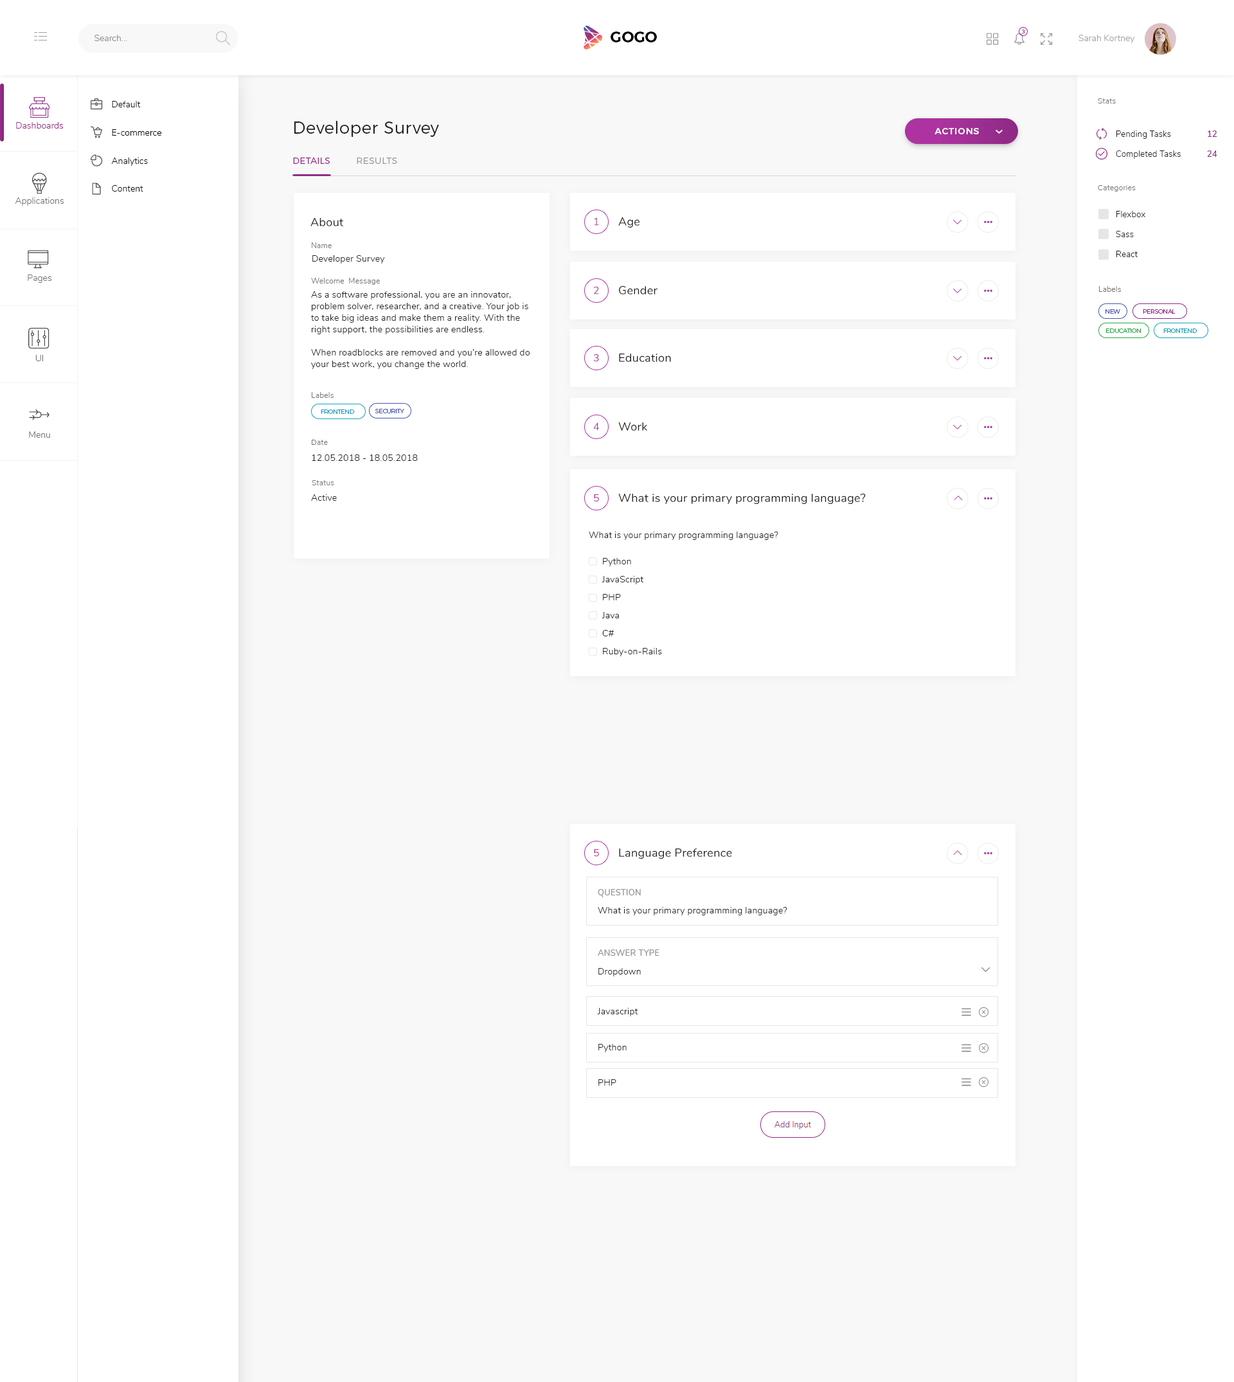
<style>
.page{position:relative;width:1234px;height:1382px;background:#ffffff}
.page>*{position:absolute;margin:0}
.t1{font:5.8px "Nunito-Regular";letter-spacing:0.02em;color:#98418f}
.t2{font:9px "Nunito-Light";color:#898989}
.t3{font:15.4px "Montserrat-SemiBold";color:#000000}
.t4{font:9px "Nunito-Light";color:#a0a0a0}
.t5{font:9px "Nunito-Light";color:#000000}
.t6{font:7.7px "Nunito-Light";letter-spacing:0.02em;color:#717171}
.t7{font:9px "Nunito-Light";color:#922c88}
.t8{font:16.7px "Montserrat-Light";letter-spacing:0.02em;color:#212121}
.t9{font:9px "Montserrat-Medium";letter-spacing:0.06em;color:#ffffff}
.t10{font:8.4px "Nunito-Light";letter-spacing:0.02em;color:#212121}
.t11{font:8.4px "Nunito-SemiBold";letter-spacing:0.02em;color:#922c88}
.t12{font:9px "Montserrat-Light";letter-spacing:0.02em;color:#922c88}
.t13{font:9px "Montserrat-Light";letter-spacing:0.02em;color:#999999}
.t14{font:9px "Nunito-Light";color:#737373}
.t15{font:11.6px "Nunito-Regular";letter-spacing:0.02em;color:#212121}
.t16{font:10.3px "Nunito-Regular";letter-spacing:0.02em;color:#ad33a1}
.t17{font:9px "Nunito-Light";letter-spacing:0.02em;color:#212121}
.t18{font:9px/11.6px "Nunito-Light";letter-spacing:0.02em;color:#212121}
.t19{font:6.4px "Montserrat-Light";letter-spacing:-0.06em;color:#4556ac}
.t20{font:6.4px "Montserrat-Light";letter-spacing:-0.06em;color:#902b86}
.t21{font:6.4px "Montserrat-Light";letter-spacing:-0.06em;color:#28a745}
.t22{font:6.4px "Montserrat-Light";letter-spacing:-0.06em;color:#17a2b8}
.t23{font:9px/18px "Nunito-Light";letter-spacing:0.02em;color:#212121}
.t24{font:8.4px "Nunito-SemiBold";letter-spacing:0.02em;color:#949494}
</style>
<div class="page">
<p class="t1" style="left:1022px;top:29px;width:3px;height:5px">3</p>
<p class="t2" style="left:94px;top:35px;width:33px;height:6px">Search...</p>
<p class="t3" style="left:611px;top:32px;width:46px;height:10px">GOGO</p>
<p class="t4" style="left:1079px;top:35px;width:56px;height:8px">Sarah Kortney</p>
<p class="t5" style="left:112px;top:101px;width:29px;height:6px">Default</p>
<p class="t6" style="left:1098px;top:98px;width:18px;height:6px">Stats</p>
<p class="t7" style="left:16px;top:122px;width:48px;height:7px">Dashboards</p>
<p class="t8" style="left:294px;top:121px;width:145px;height:16px">Developer Survey</p>
<p class="t5" style="left:112px;top:129px;width:50px;height:7px">E-commerce</p>
<p class="t9" style="left:935px;top:128px;width:44px;height:6px">ACTIONS</p>
<p class="t10" style="left:1117px;top:130px;width:54px;height:9px">Pending Tasks</p>
<p class="t11" style="left:1208px;top:130px;width:10px;height:7px">12</p>
<p class="t5" style="left:111px;top:158px;width:37px;height:8px">Analytics</p>
<p class="t12" style="left:293px;top:158px;width:104px;height:6px">DETAILS        <span class="t13"> RESULTS</span></p>
<p class="t10" style="left:1116px;top:150px;width:65px;height:9px">Completed Tasks</p>
<p class="t11" style="left:1207px;top:150px;width:11px;height:7px">24</p>
<p class="t5" style="left:112px;top:185px;width:31px;height:7px">Content</p>
<p class="t6" style="left:1098px;top:185px;width:38px;height:7px">Categories</p>
<p class="t14" style="left:15px;top:197px;width:49px;height:9px">Applications</p>
<p class="t15" style="left:310px;top:218px;width:33px;height:8px">About</p>
<p class="t16" style="left:595px;top:217px;width:4px;height:9px">1</p>
<p class="t15" style="left:618px;top:217px;width:22px;height:11px">Age</p>
<p class="t10" style="left:1117px;top:211px;width:29px;height:6px">Flexbox</p>
<p class="t10" style="left:1116px;top:231px;width:18px;height:6px">Sass</p>
<p class="t6" style="left:312px;top:242px;width:20px;height:6px">Name</p>
<p class="t17" style="left:312px;top:255px;width:73px;height:9px">Developer Survey</p>
<p class="t10" style="left:1117px;top:251px;width:21px;height:6px">React</p>
<p class="t14" style="left:28px;top:274px;width:24px;height:9px">Pages</p>
<p class="t6" style="left:311px;top:278px;width:69px;height:7px">Welcome  Message</p>
<p class="t18" style="left:311px;top:291px;width:219px;height:78px">As a software professional, you are an innovator, problem solver, researcher, and a creative. Your job is to take big ideas and make them a reality. With the right support, the possibilities are endless. <br><br>When roadblocks are removed and you’re allowed do your best work, you change the world.</p>
<p class="t16" style="left:594px;top:286px;width:5px;height:8px">2</p>
<p class="t15" style="left:619px;top:285px;width:39px;height:9px">Gender</p>
<p class="t6" style="left:1099px;top:286px;width:22px;height:6px">Labels</p>
<p class="t19" style="left:1106px;top:309px;width:14px;height:5px">NEW</p>
<p class="t20" style="left:1143px;top:309px;width:33px;height:5px">PERSONAL</p>
<p class="t21" style="left:1106px;top:328px;width:35px;height:5px">EDUCATION</p>
<p class="t22" style="left:1164px;top:328px;width:34px;height:5px">FRONTEND</p>
<p class="t16" style="left:593px;top:354px;width:6px;height:8px">3</p>
<p class="t15" style="left:619px;top:354px;width:52px;height:8px">Education</p>
<p class="t14" style="left:35px;top:355px;width:8px;height:6px">UI</p>
<p class="t6" style="left:312px;top:392px;width:22px;height:6px">Labels</p>
<p class="t22" style="left:321px;top:410px;width:34px;height:4px">FRONTEND</p>
<p class="t19" style="left:375px;top:409px;width:29px;height:4px">SECURITY</p>
<p class="t16" style="left:593px;top:422px;width:7px;height:9px">4</p>
<p class="t15" style="left:618px;top:422px;width:29px;height:9px">Work</p>
<p class="t14" style="left:29px;top:431px;width:21px;height:7px">Menu</p>
<p class="t6" style="left:312px;top:440px;width:16px;height:5px">Date</p>
<p class="t17" style="left:312px;top:455px;width:106px;height:6px">12.05.2018 - 18.05.2018</p>
<p class="t6" style="left:312px;top:480px;width:22px;height:5px">Status</p>
<p class="t17" style="left:311px;top:494px;width:26px;height:7px">Active</p>
<p class="t16" style="left:594px;top:494px;width:5px;height:8px">5</p>
<p class="t15" style="left:618px;top:493px;width:248px;height:11px">What is your primary programming language?</p>
<p class="t17" style="left:589px;top:532px;width:190px;height:8px">What is your primary programming language?</p>
<p class="t23" style="left:602px;top:558px;width:60px;height:98px">Python<br>JavaScript<br>PHP<br>Java<br>C#<br>Ruby-on-Rails</p>
<p class="t16" style="left:594px;top:849px;width:5px;height:8px">5</p>
<p class="t15" style="left:619px;top:849px;width:113px;height:10px">Language Preference</p>
<p class="t24" style="left:598px;top:889px;width:43px;height:8px">QUESTION</p>
<p class="t17" style="left:598px;top:907px;width:190px;height:8px">What is your primary programming language?</p>
<p class="t24" style="left:598px;top:950px;width:62px;height:6px">ANSWER TYPE</p>
<p class="t17" style="left:598px;top:968px;width:43px;height:9px">Dropdown</p>
<p class="t17" style="left:597px;top:1008px;width:41px;height:8px">Javascript</p>
<p class="t17" style="left:598px;top:1044px;width:29px;height:8px">Python</p>
<p class="t17" style="left:598px;top:1079px;width:18px;height:7px">PHP</p>
</div>
